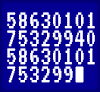
<style>
.page{position:relative;width:100px;height:92px;background:#030092}
.page>*{position:absolute;margin:0}
.t1{font:27px/18px "VT323-Regular";letter-spacing:0.005em;color:#ffffff}
</style>
<div class="page">
<p class="t1" style="left:7px;top:12px;width:88px;height:71px">58630101<br>75329940<br>58630101<br>753299</p>
</div>
